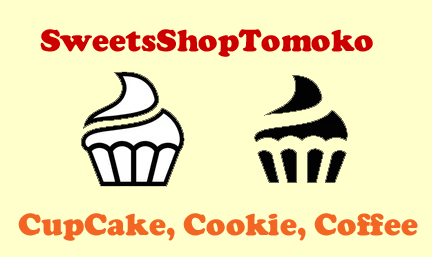
<style>
.page{position:relative;width:432px;height:257px;background:#ffffcc}
.page>*{position:absolute;margin:0}
.t1{font:32px "CooperBlack";color:#cc0000}
.t2{font:32px "CooperBlack";color:#f26522}
</style>
<div class="page">
<p class="t1" style="left:40px;top:29px;width:333px;height:28px">SweetsShopTomoko</p>
<p class="t2" style="left:18px;top:213px;width:400px;height:28px">CupCake, Cookie, Coffee</p>
</div>
